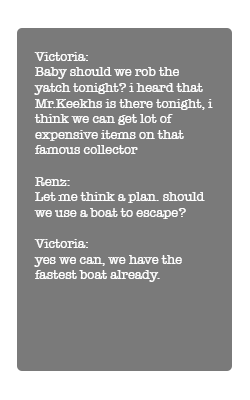
<style>
.page{position:relative;width:250px;height:400px;background:#7a7a7a}
.page>*{position:absolute;margin:0}
.t1{font:13px "AmericanTypewriter";color:#ffffff}
</style>
<div class="page">
<p class="t1" style="left:34px;top:52px;width:179px;height:230px">Victoria: <br>Baby should we rob the yatch tonight? i heard that Mr.Keekhs is there tonight, i think we can get lot of expensive items on that famous collector<br><br>Renz: <br>Let me think a plan. should we use a boat to escape?<br><br>Victoria: <br>yes we can, we have the fastest boat already.</p>
</div>
